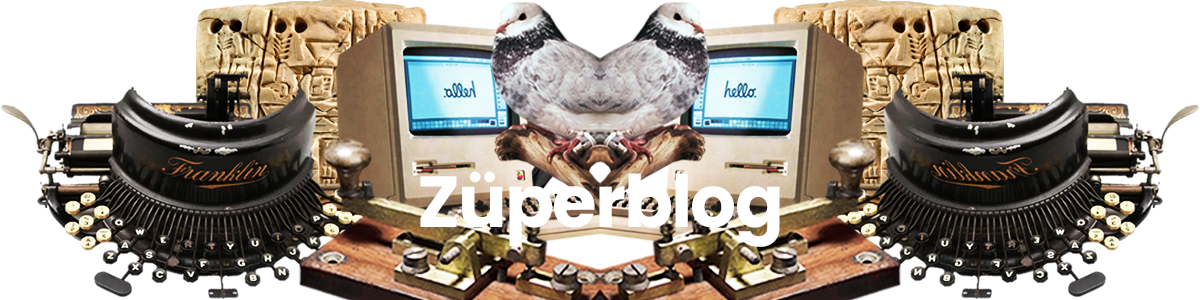
<style>
.page{position:relative;width:1200px;height:300px;background:#ffffff}
.page>*{position:absolute;margin:0}
.t1{font:72.2px "Poppins-Bold";letter-spacing:-0.025em;color:#ffffff}
</style>
<div class="page">
<p class="t1" style="left:420px;top:171px;width:360px;height:76px">Züperblog</p>
</div>
